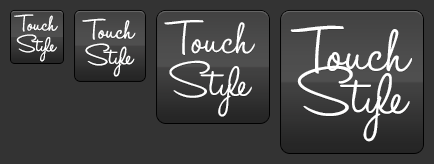
<style>
.page{position:relative;width:434px;height:164px;background:#333333}
.page>*{position:absolute;margin:0}
.t1{font:27px/21px "HaloHandletter";color:#ffffff}
.t2{font:33px/26px "HaloHandletter";color:#ffffff}
.t3{font:56px/43px "HaloHandletter";color:#ffffff}
.t4{font:76px/43px "HaloHandletter";color:#ffffff}
</style>
<div class="page">
<p class="t1" style="left:14px;top:14px;width:44px;height:48px;text-align:center">Touch<br>Style</p>
<p class="t2" style="left:82px;top:18px;width:54px;height:59px;text-align:center">Touch<br>Style</p>
<p class="t3" style="left:164px;top:20px;width:91px;height:97px;text-align:center">Touch<br>Style</p>
<p class="t4" style="left:290px;top:25px;width:122px;height:117px;text-align:center">Touch<br>Style</p>
</div>
